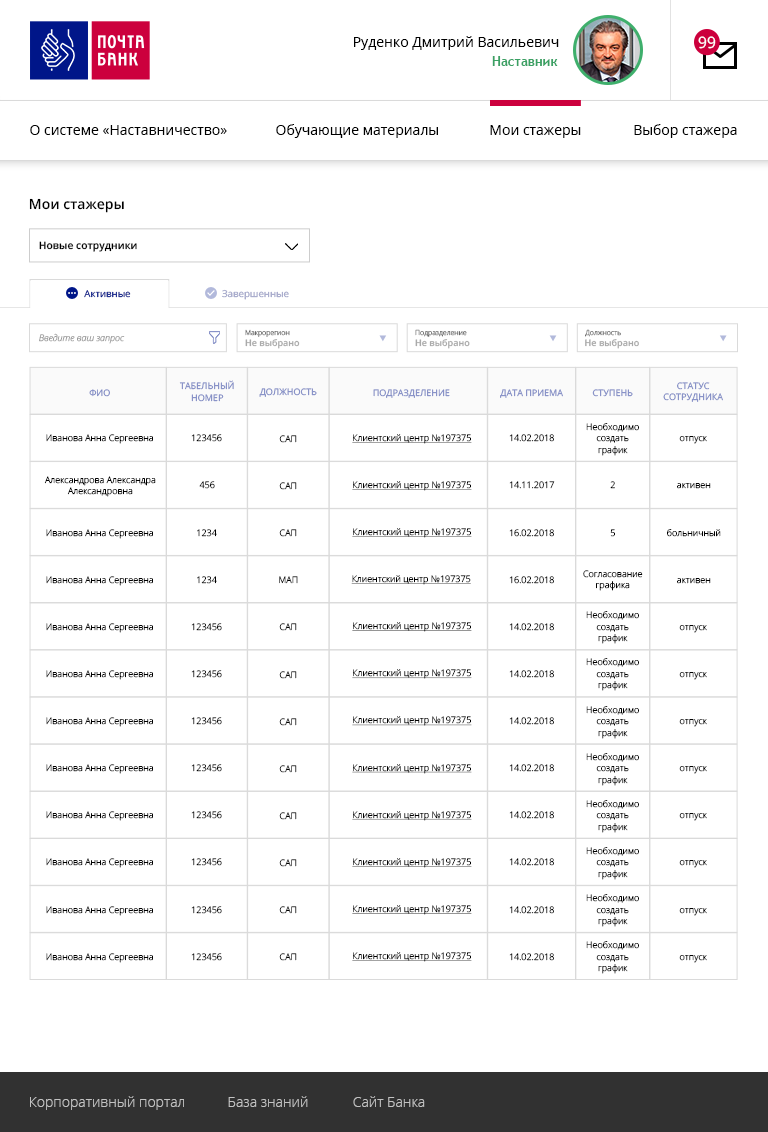
<style>
.page{position:relative;width:768px;height:1132px;background:#ffffff}
.page>*{position:absolute;margin:0}
.t1{font:14px "OpenSans";color:#000000}
.t2{font:15.7px "OpenSans";color:#ffffff}
.t3{font:13px "TrebuchetMS-Bold";color:#3ba164}
.t4{font:14px "OpenSans-Semibold";color:#000000}
.t5{font:10.3px "OpenSans-Semibold";color:#000000}
.t6{font:9.6px "OpenSans";color:#001689}
.t7{font:9.6px "OpenSans"}
.t8{font:7px "OpenSans-Light";color:#6c6c6c}
.t9{font:9px "OpenSansLight-Italic";color:#9c9c9c}
.t10{font:9px "OpenSans-Semibold";color:#aaaaaa}
.t11{font:8.9px "OpenSans";color:#7f8ac4;text-transform:uppercase}
.t12{font:8.9px/11.5px "OpenSans";color:#7f8ac4;text-transform:uppercase}
.t13{font:8.9px/11.5px "OpenSans-Light";color:#000000}
.t14{font:8.9px "OpenSans-Light";color:#000000}
.t15{font:8.9px "OpenSans-Light";color:#000000;text-decoration:underline}
.t16{font:14px "OpenSans-Light";color:#c2c2c2}
</style>
<div class="page">
<p class="t1" style="left:354px;top:36px;width:205px;height:14px">Руденко Дмитрий Васильевич</p>
<p class="t2" style="left:698px;top:36px;width:18px;height:13px">99</p>
<p class="t3" style="left:492px;top:56px;width:66px;height:10px">Наставник</p>
<p class="t1" style="left:30px;top:125px;width:197px;height:10px">О системе «Наставничество»</p>
<p class="t1" style="left:276px;top:124px;width:162px;height:14px">Обучающие материалы</p>
<p class="t1" style="left:490px;top:125px;width:91px;height:13px">Мои стажеры</p>
<p class="t1" style="left:634px;top:124px;width:103px;height:14px">Выбор стажера</p>
<p class="t4" style="left:29px;top:198px;width:95px;height:15px">Мои стажеры</p>
<p class="t5" style="left:39px;top:241px;width:98px;height:11px">Новые сотрудники</p>
<p class="t6" style="left:84px;top:290px;width:47px;height:8px">Активные</p>
<p class="t7" style="left:222px;top:289px;width:67px;height:11px">Завершенные</p>
<p class="t8" style="left:245px;top:329px;width:45px;height:8px">Макрорегион</p>
<p class="t8" style="left:415px;top:329px;width:52px;height:8px">Подразделение</p>
<p class="t8" style="left:585px;top:329px;width:36px;height:8px">Должность</p>
<p class="t9" style="left:39px;top:333px;width:86px;height:11px">Введите ваш запрос</p>
<p class="t10" style="left:245px;top:339px;width:55px;height:10px">Не выбрано</p>
<p class="t10" style="left:415px;top:339px;width:55px;height:10px">Не выбрано</p>
<p class="t10" style="left:585px;top:339px;width:54px;height:10px">Не выбрано</p>
<p class="t11" style="left:89px;top:389px;width:21px;height:8px">ФИО</p>
<p class="t12" style="left:179px;top:380px;width:55px;height:22px;text-align:center">Табельный<br>номер</p>
<p class="t11" style="left:259px;top:388px;width:58px;height:9px">Должность</p>
<p class="t11" style="left:373px;top:389px;width:77px;height:9px">Подразделение</p>
<p class="t11" style="left:500px;top:389px;width:63px;height:9px">Дата приема</p>
<p class="t11" style="left:592px;top:389px;width:41px;height:8px">Ступень</p>
<p class="t12" style="left:663px;top:382px;width:60px;height:20px;text-align:center">СТАТУС<br>СОТРУДНИКА</p>
<p class="t13" style="left:586px;top:423px;width:53px;height:33px;text-align:center">Необходимо<br>создать<br>график</p>
<p class="t14" style="left:46px;top:434px;width:107px;height:10px">Иванова Анна Сергеевна</p>
<p class="t14" style="left:191px;top:434px;width:31px;height:8px">123456</p>
<p class="t14" style="left:279px;top:435px;width:18px;height:8px">САП</p>
<p class="t15" style="left:352px;top:434px;width:120px;height:10px">Клиентский центр №197375</p>
<p class="t14" style="left:509px;top:434px;width:45px;height:8px">14.02.2018</p>
<p class="t14" style="left:679px;top:436px;width:28px;height:8px">отпуск</p>
<p class="t13" style="left:44px;top:476px;width:112px;height:21px;text-align:center">Александрова Александра<br>Александровна</p>
<p class="t14" style="left:199px;top:481px;width:16px;height:8px">456</p>
<p class="t14" style="left:279px;top:482px;width:18px;height:8px">САП</p>
<p class="t15" style="left:352px;top:481px;width:120px;height:10px">Клиентский центр №197375</p>
<p class="t14" style="left:509px;top:481px;width:46px;height:8px">14.11.2017</p>
<p class="t14" style="left:610px;top:481px;width:5px;height:8px">2</p>
<p class="t14" style="left:677px;top:483px;width:34px;height:6px">активен</p>
<p class="t14" style="left:46px;top:529px;width:107px;height:10px">Иванова Анна Сергеевна</p>
<p class="t14" style="left:197px;top:529px;width:20px;height:8px">1234</p>
<p class="t14" style="left:279px;top:529px;width:18px;height:8px">САП</p>
<p class="t15" style="left:352px;top:528px;width:120px;height:10px">Клиентский центр №197375</p>
<p class="t14" style="left:509px;top:529px;width:45px;height:8px">16.02.2018</p>
<p class="t14" style="left:610px;top:529px;width:5px;height:8px">5</p>
<p class="t14" style="left:667px;top:529px;width:54px;height:8px">больничный</p>
<p class="t14" style="left:46px;top:576px;width:107px;height:10px">Иванова Анна Сергеевна</p>
<p class="t14" style="left:197px;top:576px;width:20px;height:8px">1234</p>
<p class="t14" style="left:279px;top:576px;width:19px;height:8px">МАП</p>
<p class="t15" style="left:351px;top:575px;width:120px;height:10px">Клиентский центр №197375</p>
<p class="t14" style="left:509px;top:576px;width:45px;height:8px">16.02.2018</p>
<p class="t13" style="left:583px;top:570px;width:60px;height:21px;text-align:center">Согласование<br>графика</p>
<p class="t14" style="left:677px;top:578px;width:34px;height:6px">активен</p>
<p class="t13" style="left:586px;top:611px;width:53px;height:33px;text-align:center">Необходимо<br>создать<br>график</p>
<p class="t14" style="left:46px;top:623px;width:107px;height:10px">Иванова Анна Сергеевна</p>
<p class="t14" style="left:191px;top:623px;width:31px;height:8px">123456</p>
<p class="t14" style="left:279px;top:623px;width:18px;height:8px">САП</p>
<p class="t15" style="left:352px;top:622px;width:120px;height:10px">Клиентский центр №197375</p>
<p class="t14" style="left:509px;top:623px;width:45px;height:8px">14.02.2018</p>
<p class="t14" style="left:679px;top:625px;width:28px;height:8px">отпуск</p>
<p class="t13" style="left:586px;top:658px;width:53px;height:33px;text-align:center">Необходимо<br>создать<br>график</p>
<p class="t14" style="left:46px;top:670px;width:107px;height:10px">Иванова Анна Сергеевна</p>
<p class="t14" style="left:191px;top:670px;width:31px;height:8px">123456</p>
<p class="t14" style="left:279px;top:671px;width:18px;height:8px">САП</p>
<p class="t15" style="left:352px;top:669px;width:120px;height:10px">Клиентский центр №197375</p>
<p class="t14" style="left:509px;top:670px;width:45px;height:8px">14.02.2018</p>
<p class="t14" style="left:679px;top:672px;width:28px;height:8px">отпуск</p>
<p class="t13" style="left:586px;top:706px;width:53px;height:33px;text-align:center">Необходимо<br>создать<br>график</p>
<p class="t14" style="left:46px;top:717px;width:107px;height:10px">Иванова Анна Сергеевна</p>
<p class="t14" style="left:191px;top:717px;width:31px;height:8px">123456</p>
<p class="t14" style="left:279px;top:718px;width:18px;height:8px">САП</p>
<p class="t15" style="left:352px;top:716px;width:120px;height:10px">Клиентский центр №197375</p>
<p class="t14" style="left:509px;top:717px;width:45px;height:8px">14.02.2018</p>
<p class="t14" style="left:679px;top:719px;width:28px;height:8px">отпуск</p>
<p class="t13" style="left:586px;top:753px;width:53px;height:33px;text-align:center">Необходимо<br>создать<br>график</p>
<p class="t14" style="left:46px;top:764px;width:107px;height:10px">Иванова Анна Сергеевна</p>
<p class="t14" style="left:191px;top:764px;width:31px;height:8px">123456</p>
<p class="t14" style="left:279px;top:765px;width:18px;height:8px">САП</p>
<p class="t15" style="left:352px;top:764px;width:120px;height:10px">Клиентский центр №197375</p>
<p class="t14" style="left:509px;top:764px;width:45px;height:8px">14.02.2018</p>
<p class="t14" style="left:679px;top:766px;width:28px;height:8px">отпуск</p>
<p class="t13" style="left:586px;top:800px;width:53px;height:33px;text-align:center">Необходимо<br>создать<br>график</p>
<p class="t14" style="left:46px;top:811px;width:107px;height:10px">Иванова Анна Сергеевна</p>
<p class="t14" style="left:191px;top:811px;width:31px;height:8px">123456</p>
<p class="t14" style="left:279px;top:812px;width:18px;height:8px">САП</p>
<p class="t15" style="left:352px;top:811px;width:120px;height:10px">Клиентский центр №197375</p>
<p class="t14" style="left:509px;top:811px;width:45px;height:8px">14.02.2018</p>
<p class="t14" style="left:679px;top:813px;width:28px;height:8px">отпуск</p>
<p class="t13" style="left:586px;top:847px;width:53px;height:33px;text-align:center">Необходимо<br>создать<br>график</p>
<p class="t14" style="left:46px;top:858px;width:107px;height:10px">Иванова Анна Сергеевна</p>
<p class="t14" style="left:191px;top:858px;width:31px;height:8px">123456</p>
<p class="t14" style="left:279px;top:859px;width:18px;height:8px">САП</p>
<p class="t15" style="left:352px;top:858px;width:120px;height:10px">Клиентский центр №197375</p>
<p class="t14" style="left:509px;top:858px;width:45px;height:8px">14.02.2018</p>
<p class="t14" style="left:679px;top:860px;width:28px;height:8px">отпуск</p>
<p class="t13" style="left:586px;top:894px;width:53px;height:33px;text-align:center">Необходимо<br>создать<br>график</p>
<p class="t15" style="left:352px;top:905px;width:120px;height:10px">Клиентский центр №197375</p>
<p class="t14" style="left:46px;top:906px;width:107px;height:10px">Иванова Анна Сергеевна</p>
<p class="t14" style="left:191px;top:906px;width:31px;height:8px">123456</p>
<p class="t14" style="left:279px;top:906px;width:18px;height:8px">САП</p>
<p class="t14" style="left:509px;top:906px;width:45px;height:8px">14.02.2018</p>
<p class="t14" style="left:679px;top:908px;width:28px;height:8px">отпуск</p>
<p class="t13" style="left:586px;top:941px;width:53px;height:33px;text-align:center">Необходимо<br>создать<br>график</p>
<p class="t14" style="left:46px;top:953px;width:107px;height:10px">Иванова Анна Сергеевна</p>
<p class="t14" style="left:191px;top:953px;width:31px;height:8px">123456</p>
<p class="t14" style="left:279px;top:953px;width:18px;height:8px">САП</p>
<p class="t15" style="left:352px;top:952px;width:120px;height:10px">Клиентский центр №197375</p>
<p class="t14" style="left:509px;top:953px;width:45px;height:8px">14.02.2018</p>
<p class="t14" style="left:679px;top:955px;width:28px;height:8px">отпуск</p>
<p class="t16" style="left:30px;top:1096px;width:154px;height:14px">Корпоративный портал</p>
<p class="t16" style="left:228px;top:1096px;width:80px;height:11px">База знаний</p>
<p class="t16" style="left:353px;top:1096px;width:72px;height:11px">Сайт Банка</p>
</div>
